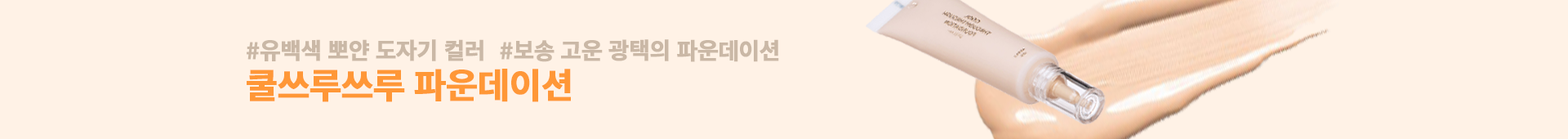
<style>
.page{position:relative;width:1568px;height:139px;background:#fff2e6}
.page>*{position:absolute;margin:0}
.t1{font:22.9px "NotoSansKR-Bold";letter-spacing:-0.04em;color:#cab8a6;font-weight:bold}
.t2{font:35.1px "NotoSansKR-Bold";letter-spacing:-0.04em;color:#ff9737;font-weight:bold}
</style>
<div class="page">
<p class="t1" style="left:247px;top:39px;width:532px;height:23px">#유백색 뽀얀 도자기 컬러   #보송 고운 광택의 파운데이션</p>
<p class="t2" style="left:247px;top:69px;width:324px;height:33px">쿨쓰루쓰루 파운데이션</p>
</div>
